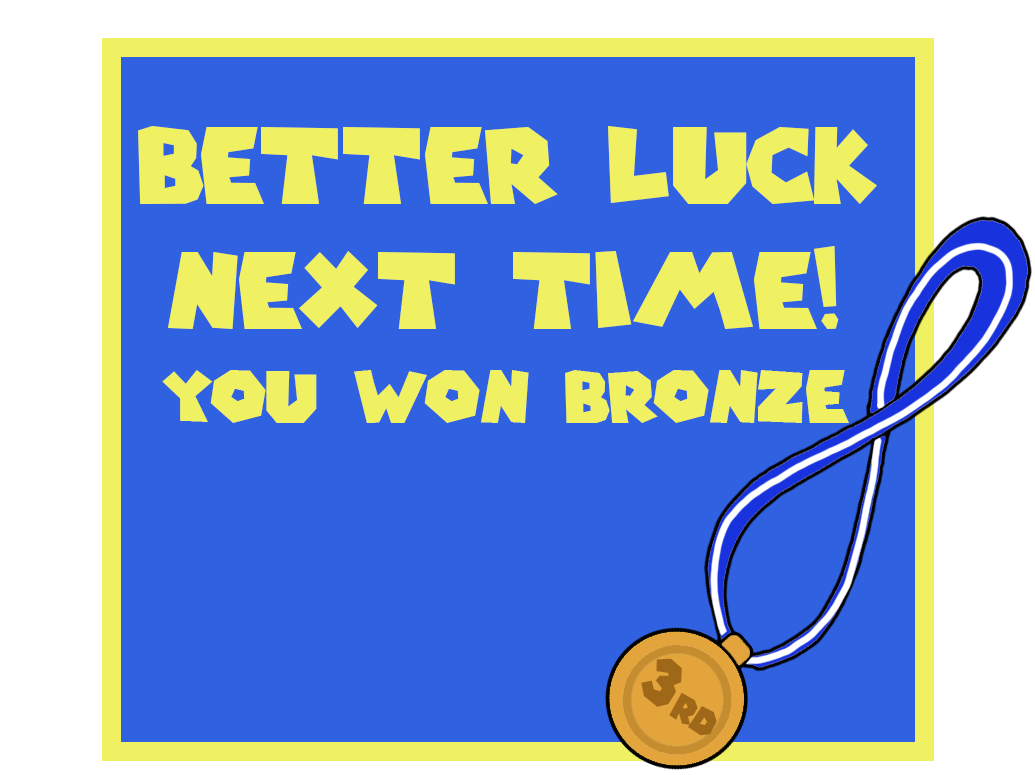
<style>
.page{position:relative;width:1035px;height:775px;background:#2f61e1}
.page>*{position:absolute;margin:0}
.t1{font:104.2px "SuperMarioGalaxy";color:#eff163}
.t2{font:70.9px/94.3px "SuperMarioGalaxy";color:#eff163}
.t3{font:36.1px "SuperMarioGalaxy";color:#9f6818}
.t4{font:64.4px "SuperMarioGalaxy";color:#9f6818}
</style>
<div class="page">
<p class="t1" style="left:138px;top:126px;width:739px;height:297px;text-align:center">Better luck<br>next time!<br><span class="t2">You won bronze</span></p>
<p class="t3" style="left:641px;top:658px;width:76px;height:78px;rotate:34deg"><span class="t4">3</span>rd</p>
</div>
